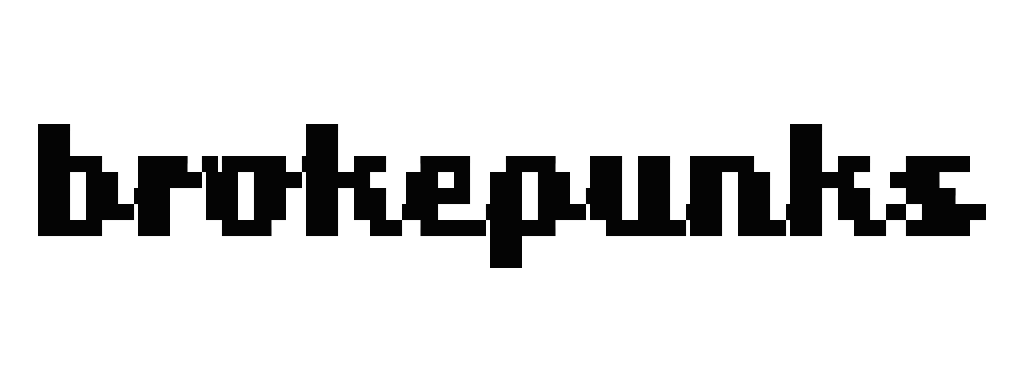
<style>
.page{position:relative;width:1024px;height:392px;background:#ffffff}
.page>*{position:absolute;margin:0}
.t1{font:160px "Superscript";letter-spacing:-0.075em;color:#040404}
</style>
<div class="page">
<p class="t1" style="left:38px;top:124px;width:948px;height:144px">brokepunks</p>
</div>
